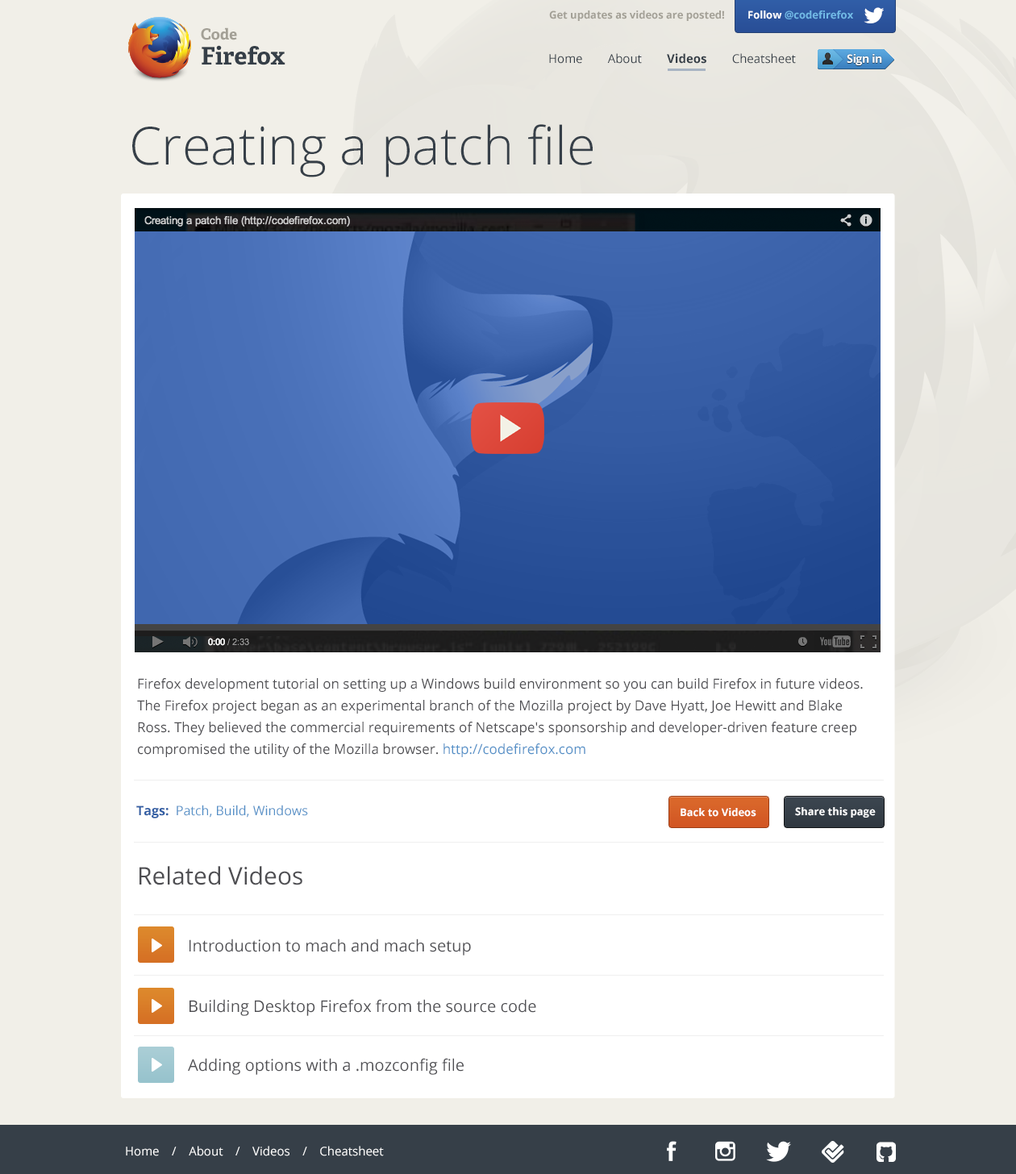
<style>
.page{position:relative;width:1016px;height:1174px;background:#ffffff}
.page>*{position:absolute;margin:0}
.t1{font:10.5px "OpenSans-Bold";color:#a3a096}
.t2{font:10.5px "OpenSans-Bold";color:#71b9e6}
.t3{font:10.5px "OpenSans-Bold";color:#ffffff}
.t4{font:15.3px "AdelleBasic-Bold";color:#a3a096}
.t5{font:24.2px "AdelleBasic-Bold";color:#363f48}
.t6{font:12.1px "OpenSans";color:#363f48}
.t7{font:12.1px "OpenSans-Bold";color:#363f48}
.t8{font:52.4px "OpenSans-Light";color:#363f48}
.t9{font:13.7px/21.8px "OpenSans";color:#4e4e52}
.t10{font:13.7px/21.8px "OpenSans";color:#5590c7}
.t11{font:12.9px "OpenSans";color:#5590c7}
.t12{font:12.9px "OpenSans-Bold";color:#335fa4}
.t13{font:24.2px "OpenSans";color:#4e4e52}
.t14{font:16.1px "OpenSans";color:#4e4e52}
.t15{font:12.1px "OpenSans";color:#ffffff}
</style>
<div class="page">
<p class="t1" style="left:549px;top:10px;width:175px;height:11px">Get updates as videos are posted!</p>
<p class="t2" style="left:748px;top:10px;width:105px;height:9px"><span class="t3">Follow</span> @codefirefox</p>
<p class="t4" style="left:201px;top:27px;width:36px;height:13px">Code</p>
<p class="t5" style="left:202px;top:45px;width:83px;height:20px">Firefox</p>
<p class="t6" style="left:549px;top:53px;width:247px;height:11px">Home        About        <span class="t7">Videos</span>        Cheatsheet</p>
<p class="t8" style="left:132px;top:124px;width:461px;height:53px">Creating a patch file</p>
<p class="t9" style="left:137px;top:678px;width:726px;height:79px">Firefox development tutorial on setting up a Windows build environment so you can build Firefox in future videos. The Firefox project began as an experimental branch of the Mozilla project by Dave Hyatt, Joe Hewitt and Blake Ross. They believed the commercial requirements of Netscape's sponsorship and developer-driven feature creep compromised the utility of the Mozilla browser. <span class="t10">http://codefirefox.com</span></p>
<p class="t11" style="left:136px;top:805px;width:172px;height:13px"><span class="t12">Tags:  </span>Patch, Build, Windows</p>
<p class="t3" style="left:680px;top:808px;width:76px;height:9px">Back to Videos</p>
<p class="t3" style="left:795px;top:807px;width:81px;height:11px">Share this page</p>
<p class="t13" style="left:139px;top:866px;width:163px;height:19px">Related Videos</p>
<p class="t14" style="left:189px;top:938px;width:282px;height:17px">Introduction to mach and mach setup</p>
<p class="t14" style="left:189px;top:999px;width:347px;height:17px">Building Desktop Firefox from the source code</p>
<p class="t14" style="left:188px;top:1058px;width:276px;height:17px">Adding options with a .mozconfig file</p>
<p class="t15" style="left:126px;top:1146px;width:258px;height:10px">Home    /    About    /    Videos    /    Cheatsheet</p>
</div>
